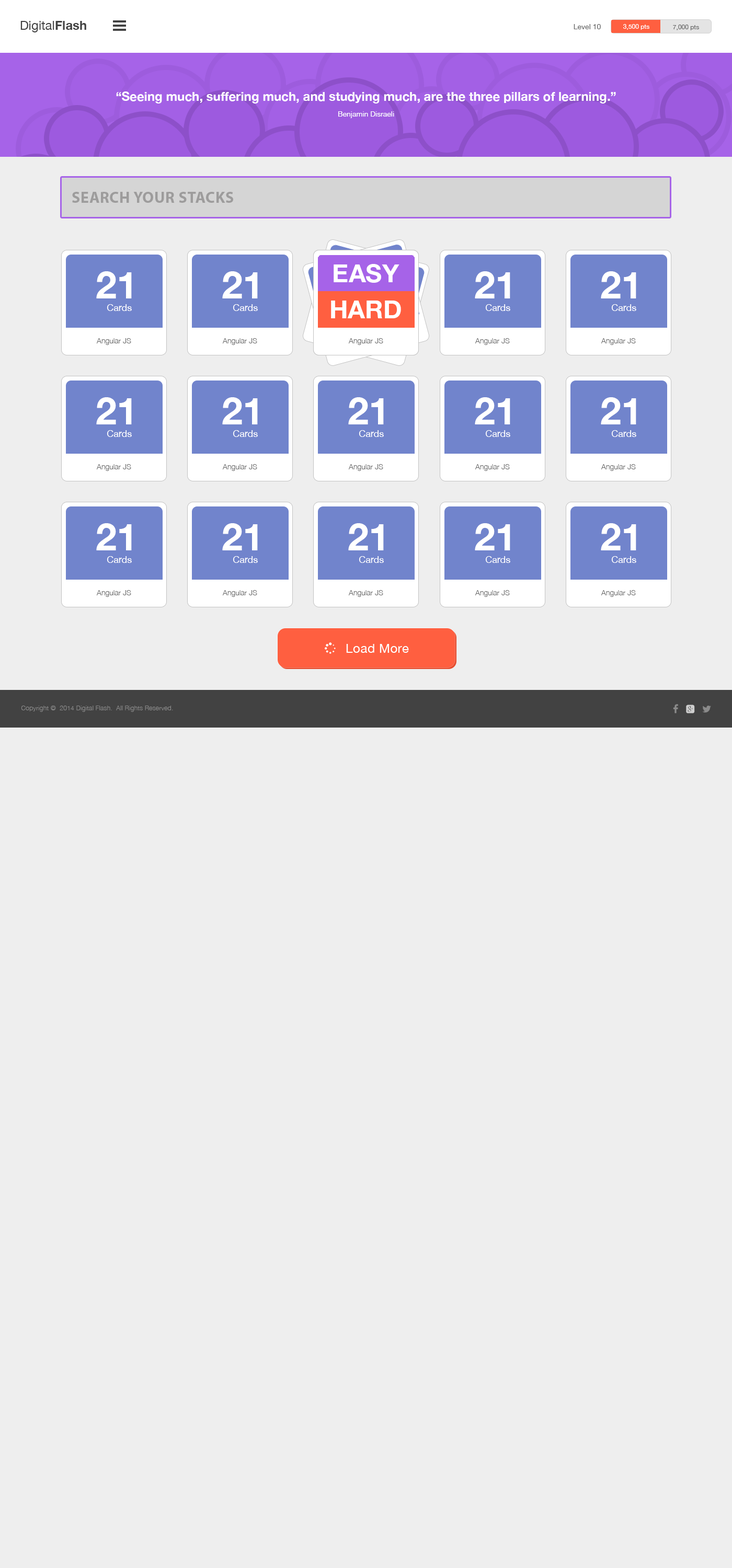
<style>
.page{position:relative;width:732px;height:1568px;background:#eeeeee}
.page>*{position:absolute;margin:0}
.t1{font:12.5px "HelveticaNeue";color:#424242}
.t2{font:12.5px "HelveticaNeue-Bold";color:#424242}
.t3{font:7.3px "HelveticaNeue";color:#666666}
.t4{font:6.3px "HelveticaNeue";color:#ffffff}
.t5{font:6.3px "HelveticaNeue";color:#666666}
.t6{font:12.5px "HelveticaNeue-Bold";color:#ffffff}
.t7{font:7.3px/15.7px "HelveticaNeue";color:#ffffff}
.t8{font:15.7px "MyriadPro-Bold";letter-spacing:0.025em;color:#9d9c9c}
.t9{font:25.1px "HelveticaNeue-Bold";color:#ffffff}
.t10{font:37.6px "HelveticaNeue-Bold";color:#ffffff}
.t11{font:9.4px "HelveticaNeue";color:#ffffff}
.t12{font:7.3px "HelveticaNeue-Light";color:#666666}
.t13{font:6.3px "HelveticaNeue-Light";letter-spacing:0.025em;color:#8b8b8b}
</style>
<div class="page">
<p class="t1" style="left:20px;top:21px;width:66px;height:11px">Digital<span class="t2">Flash</span></p>
<p class="t3" style="left:573px;top:24px;width:28px;height:5px">Level 10</p>
<p class="t4" style="left:623px;top:24px;width:26px;height:6px">3,500 pts</p>
<p class="t5" style="left:673px;top:25px;width:26px;height:5px">7,000 pts</p>
<p class="t6" style="left:116px;top:91px;width:500px;height:27px;text-align:center">“Seeing much, suffering much, and studying much, are the three pillars of learning.”<br><span class="t7">Benjamin Disraeli</span></p>
<p class="t8" style="left:72px;top:192px;width:161px;height:11px">SEARCH YOUR STACKS</p>
<p class="t9" style="left:333px;top:264px;width:66px;height:19px">EASY</p>
<p class="t10" style="left:96px;top:271px;width:36px;height:27px">21</p>
<p class="t10" style="left:222px;top:271px;width:36px;height:27px">21</p>
<p class="t10" style="left:475px;top:271px;width:35px;height:27px">21</p>
<p class="t10" style="left:601px;top:271px;width:35px;height:27px">21</p>
<p class="t11" style="left:107px;top:304px;width:25px;height:7px">Cards</p>
<p class="t11" style="left:233px;top:304px;width:25px;height:7px">Cards</p>
<p class="t9" style="left:331px;top:301px;width:70px;height:17px">HARD</p>
<p class="t11" style="left:485px;top:304px;width:25px;height:7px">Cards</p>
<p class="t11" style="left:611px;top:304px;width:25px;height:7px">Cards</p>
<p class="t12" style="left:96px;top:338px;width:35px;height:7px">Angular JS</p>
<p class="t12" style="left:222px;top:338px;width:35px;height:7px">Angular JS</p>
<p class="t12" style="left:348px;top:338px;width:35px;height:7px">Angular JS</p>
<p class="t12" style="left:348px;top:338px;width:35px;height:7px">Angular JS</p>
<p class="t12" style="left:475px;top:338px;width:35px;height:7px">Angular JS</p>
<p class="t12" style="left:601px;top:338px;width:35px;height:7px">Angular JS</p>
<p class="t10" style="left:96px;top:397px;width:36px;height:27px">21</p>
<p class="t10" style="left:222px;top:397px;width:36px;height:27px">21</p>
<p class="t10" style="left:348px;top:397px;width:36px;height:27px">21</p>
<p class="t10" style="left:475px;top:397px;width:35px;height:27px">21</p>
<p class="t10" style="left:601px;top:397px;width:35px;height:27px">21</p>
<p class="t11" style="left:107px;top:430px;width:25px;height:7px">Cards</p>
<p class="t11" style="left:233px;top:430px;width:25px;height:7px">Cards</p>
<p class="t11" style="left:359px;top:430px;width:25px;height:7px">Cards</p>
<p class="t11" style="left:485px;top:430px;width:25px;height:7px">Cards</p>
<p class="t11" style="left:611px;top:430px;width:25px;height:7px">Cards</p>
<p class="t12" style="left:96px;top:464px;width:35px;height:7px">Angular JS</p>
<p class="t12" style="left:222px;top:464px;width:35px;height:7px">Angular JS</p>
<p class="t12" style="left:348px;top:464px;width:35px;height:7px">Angular JS</p>
<p class="t12" style="left:475px;top:464px;width:35px;height:7px">Angular JS</p>
<p class="t12" style="left:601px;top:464px;width:35px;height:7px">Angular JS</p>
<p class="t10" style="left:96px;top:523px;width:36px;height:27px">21</p>
<p class="t10" style="left:222px;top:523px;width:36px;height:27px">21</p>
<p class="t10" style="left:348px;top:523px;width:36px;height:27px">21</p>
<p class="t10" style="left:475px;top:523px;width:35px;height:27px">21</p>
<p class="t10" style="left:601px;top:523px;width:35px;height:27px">21</p>
<p class="t11" style="left:107px;top:556px;width:25px;height:7px">Cards</p>
<p class="t11" style="left:233px;top:556px;width:25px;height:7px">Cards</p>
<p class="t11" style="left:359px;top:556px;width:25px;height:7px">Cards</p>
<p class="t11" style="left:485px;top:556px;width:25px;height:7px">Cards</p>
<p class="t11" style="left:611px;top:556px;width:25px;height:7px">Cards</p>
<p class="t12" style="left:96px;top:590px;width:35px;height:7px">Angular JS</p>
<p class="t12" style="left:222px;top:590px;width:35px;height:7px">Angular JS</p>
<p class="t12" style="left:348px;top:590px;width:35px;height:7px">Angular JS</p>
<p class="t12" style="left:475px;top:590px;width:35px;height:7px">Angular JS</p>
<p class="t12" style="left:601px;top:590px;width:35px;height:7px">Angular JS</p>
<p class="t13" style="left:21px;top:706px;width:152px;height:6px">Copyright ©  2014 Digital Flash.  All Rights Reserved.</p>
</div>
